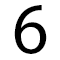
<style>
.page{position:relative;width:60px;height:60px;background:#ffffff}
.page>*{position:absolute;margin:0}
.t1{font:72px "MyriadPro-Regular";color:#000000}
</style>
<div class="page">
<p class="t1" style="left:14px;top:5px;width:33px;height:49px">6</p>
</div>
